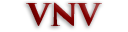
<style>
.page{position:relative;width:128px;height:32px;background:#ffffff}
.page>*{position:absolute;margin:0}
.t1{font:30px "TrajanPro3-Bold";color:#820000}
</style>
<div class="page">
<p class="t1" style="left:26px;top:2px;width:76px;height:24px">VNV</p>
</div>
